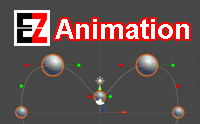
<style>
.page{position:relative;width:200px;height:124px;background:#474747}
.page>*{position:absolute;margin:0}
.t1{font:26.7px "Arial-BoldMT";color:#ffffff}
</style>
<div class="page">
<p class="t1" style="left:55px;top:19px;width:134px;height:20px">Animation</p>
</div>
